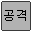
<style>
.page{position:relative;width:32px;height:32px;background:#b2b2b2}
.page>*{position:absolute;margin:0}
.t1{font:12px "Gulim";letter-spacing:0.04em;color:#000000}
</style>
<div class="page">
<p class="t1" style="left:4px;top:10px;width:22px;height:11px">공격</p>
</div>
